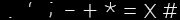
<style>
.page{position:relative;width:180px;height:20px;background:#000000}
.page>*{position:absolute;margin:0}
.t1{font:25px "RobotoMono-Thin"}
.t2{font:25px "RobotoMono-Thin";color:#f2f2f2}
.t3{font:21.4px "RobotoMono-Thin";color:#f2f2f2;scale:1.17 1}
</style>
<div class="page">
<p class="t1" style="left:29px;top:2px;width:3px;height:5px">‘</p>
<p class="t2" style="left:49px;top:2px;width:4px;height:16px">;</p>
<p class="t2" style="left:83px;top:4px;width:14px;height:14px">+</p>
<p class="t2" style="left:104px;top:2px;width:12px;height:10px">*</p>
<p class="t2" style="left:144px;top:4px;width:13px;height:14px">x</p>
<p class="t3" style="left:163px;top:3px;width:14px;height:15px">#</p>
<p class="t2" style="left:9px;top:17px;width:3px;height:1px">.</p>
<p class="t2" style="left:65px;top:10px;width:10px;height:1px">-</p>
<p class="t2" style="left:124px;top:8px;width:12px;height:6px">=</p>
</div>
